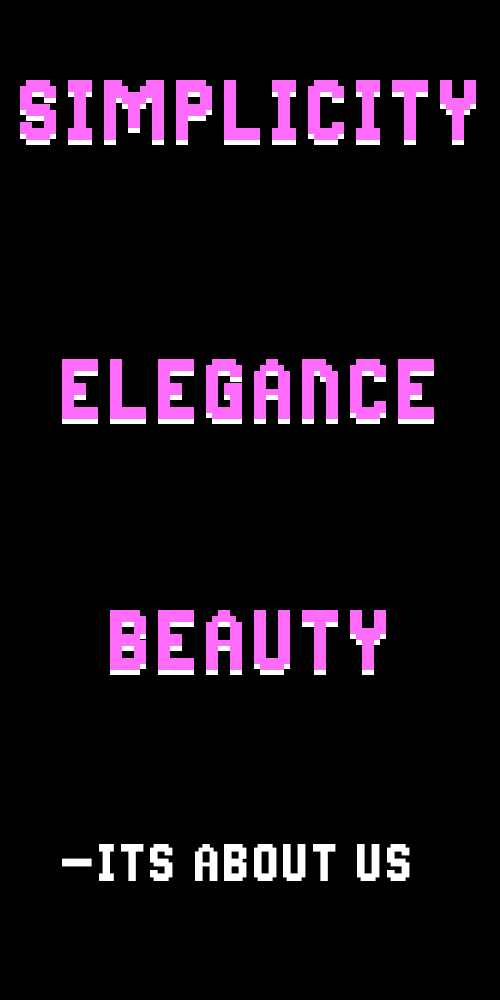
<style>
.page{position:relative;width:500px;height:1000px;background:#000000}
.page>*{position:absolute;margin:0}
.t1{font:77.9px "Bionicle-training-card-font-2.4";color:#ff6bfa}
.t2{font:48px "Bionicle-training-card-font-2.4";color:#ffffff}
</style>
<div class="page">
<p class="t1" style="left:20px;top:85px;width:456px;height:60px">Simplicity</p>
<p class="t1" style="left:20px;top:80px;width:456px;height:60px">Simplicity</p>
<p class="t1" style="left:62px;top:364px;width:372px;height:60px">Elegance</p>
<p class="t1" style="left:62px;top:359px;width:372px;height:60px">Elegance</p>
<p class="t1" style="left:110px;top:615px;width:276px;height:60px">Beauty</p>
<p class="t1" style="left:110px;top:610px;width:276px;height:60px">Beauty</p>
<p class="t2" style="left:62px;top:844px;width:348px;height:37px">-ItS about us</p>
</div>
